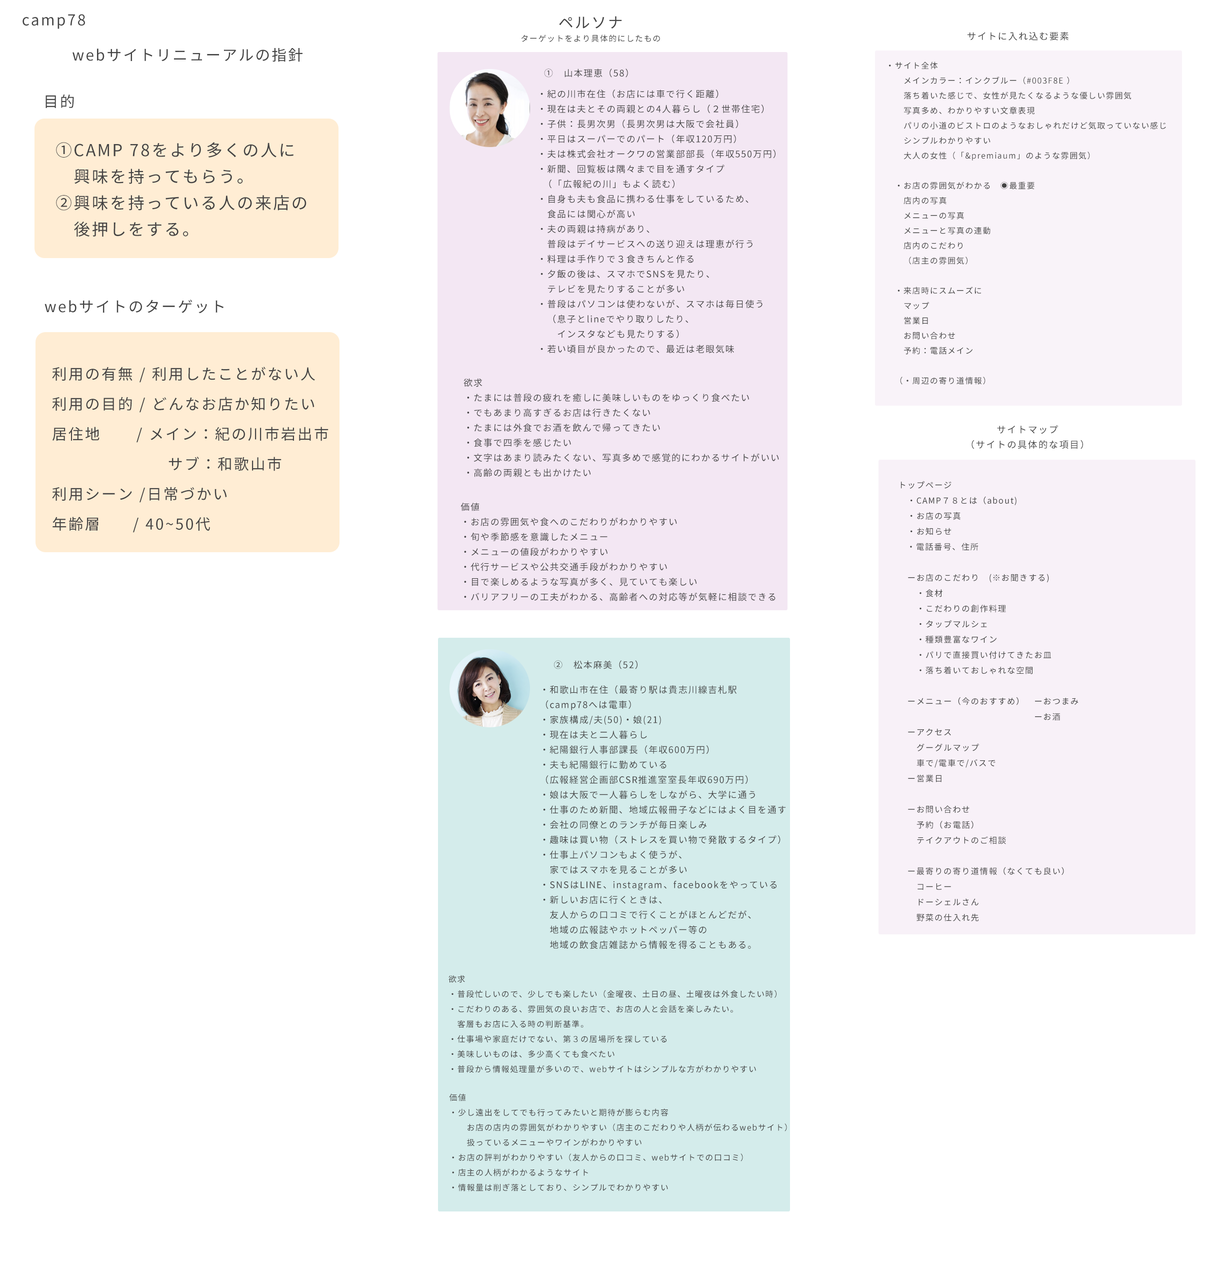
<style>
.page{position:relative;width:1225px;height:1284px;background:#ffffff}
.page>*{position:absolute;margin:0}
.t1{font:15px "NotoSansCJKjp-Regular";letter-spacing:0.1em;color:#444444}
.t2{font:8px "NotoSansCJKjp-Regular";letter-spacing:0.1em;color:#444444}
.t3{font:9.4px "NotoSansCJKjp-Regular";letter-spacing:0.1em;color:#444444}
.t4{font:8px/15px "NotoSansCJKjp-Regular";letter-spacing:0.1em;color:#444444}
.t5{font:9px "NotoSansCJKjp-Regular";letter-spacing:0.1em;color:#444444}
.t6{font:9px/15px "NotoSansCJKjp-Regular";letter-spacing:0.1em;color:#444444}
.t7{font:16.5px/26.4px "NotoSansCJKjp-Regular";letter-spacing:0.1em;color:#444444}
.t8{font:15px/30px "NotoSansCJKjp-Regular";letter-spacing:0.1em;color:#444444}
.t9{font:9.4px/15px "NotoSansCJKjp-Regular";letter-spacing:0.1em;color:#444444}
.t10{font:8.2px/15.4px "NotoSansCJKjp-Regular";letter-spacing:0.1em;color:#444444}
</style>
<div class="page">
<p class="t1" style="left:22px;top:14px;width:63px;height:15px">camp78</p>
<p class="t1" style="left:559px;top:16px;width:63px;height:12px">ペルソナ</p>
<p class="t2" style="left:521px;top:34px;width:139px;height:8px">ターゲットをより具体的にしたもの</p>
<p class="t3" style="left:968px;top:32px;width:100px;height:8px">サイトに入れ込む要素</p>
<p class="t1" style="left:72px;top:48px;width:230px;height:14px">webサイトリニューアルの指針</p>
<p class="t4" style="left:889px;top:62px;width:277px;height:322px">・サイト全体<br>　　メインカラー：インクブルー（#003F8E ）<br>　　落ち着いた感じで、女性が見たくなるような優しい雰囲気<br>　　写真多め、わかりやすい文章表現<br>　　パリの小道のビストロのようなおしゃれだけど気取っていない感じ<br>　　シンプルわかりやすい<br>　　大人の女性（「&amp;premiaum」のような雰囲気）<br><br>　・お店の雰囲気がわかる　◉最重要<br>　　店内の写真<br>　　メニューの写真<br>　　メニューと写真の連動<br>　　店内のこだわり<br>　　（店主の雰囲気）<br>　<br>　・来店時にスムーズに<br>　　マップ<br>　　営業日<br>　　お問い合わせ<br>　　予約：電話メイン<br>　<br>　（・周辺の寄り道情報）</p>
<p class="t5" style="left:544px;top:68px;width:84px;height:10px">①　山本理恵（58）</p>
<p class="t6" style="left:540px;top:90px;width:236px;height:264px">・紀の川市在住（お店には車で行く距離）<br>・現在は夫とその両親との4人暮らし（２世帯住宅）<br>・子供：長男次男（長男次男は大阪で会社員）<br>・平日はスーパーでのパート（年収120万円）<br>・夫は株式会社オークワの営業部部長（年収550万円）<br>・新聞、回覧板は隅々まで目を通すタイプ<br>  （「広報紀の川」もよく読む）<br>・自身も夫も食品に携わる仕事をしているため、<br>　食品には関心が高い<br>・夫の両親は持病があり、<br>　普段はデイサービスへの送り迎えは理恵が行う<br>・料理は手作りで３食きちんと作る<br>・夕飯の後は、スマホでSNSを見たり、<br>　テレビを見たりすることが多い<br>・普段はパソコンは使わないが、スマホは毎日使う<br>　（息子とlineでやり取りしたり、<br>　　インスタなども見たりする）<br>・若い頃目が良かったので、最近は老眼気味</p>
<p class="t1" style="left:46px;top:94px;width:28px;height:14px">目的</p>
<p class="t7" style="left:56px;top:142px;width:250px;height:94px">①CAMP 78をより多くの人に<br>　興味を持ってもらう。<br>②興味を持っている人の来店の<br>　後押しをする。</p>
<p class="t1" style="left:44px;top:300px;width:180px;height:14px">webサイトのターゲット</p>
<p class="t8" style="left:52px;top:366px;width:276px;height:166px">利用の有無 / 利用したことがない人<br>　利用の目的 / どんなお店か知りたい<br>　居住地       / メイン：紀の川市岩出市<br>　　　　　          サブ：和歌山市<br>　利用シーン /日常づかい<br>　年齢層　   / 40~50代</p>
<p class="t6" style="left:464px;top:378px;width:315px;height:99px">欲求<br>・たまには普段の疲れを癒しに美味しいものをゆっくり食べたい<br>・でもあまり高すぎるお店は行きたくない<br>・たまには外食でお酒を飲んで帰ってきたい<br>・食事で四季を感じたい<br>・文字はあまり読みたくない、写真多めで感覚的にわかるサイトがいい<br>・高齢の両親とも出かけたい</p>
<p class="t9" style="left:972px;top:425px;width:111px;height:24px;text-align:center">サイトマップ<br>（サイトの具体的な項目）</p>
<p class="t10" style="left:900px;top:481px;width:178px;height:440px">トップページ<br>　・CAMP７８とは（about)<br>　・お店の写真　<br>　・お知らせ<br>   ・電話番号、住所<br><br>　ーお店のこだわり　(※お聞きする)<br>　　・食材<br>　　・こだわりの創作料理<br>　　・タップマルシェ<br>　　・種類豊富なワイン<br>　　・パリで直接買い付けてきたお皿<br>　　・落ち着いておしゃれな空間<br><br>　ーメニュー（今のおすすめ）　ーおつまみ<br>　　　　　　　　　　　　　　　ーお酒<br>　ーアクセス<br>　　グーグルマップ<br>　　車で/電車で/バスで<br>　ー営業日<br>　　<br>　ーお問い合わせ<br>　　予約（お電話）<br>　　テイクアウトのご相談<br><br>　ー最寄りの寄り道情報（なくても良い）<br>　　コーヒー<br>　　ドーシェルさん<br>　　野菜の仕入れ先</p>
<p class="t6" style="left:460px;top:502px;width:316px;height:99px">価値<br>・お店の雰囲気や食へのこだわりがわかりやすい<br>・旬や季節感を意識したメニュー<br>・メニューの値段がわかりやすい<br>・代行サービスや公共交通手段がわかりやすい<br>・目で楽しめるような写真が多く、見ていても楽しい<br>・バリアフリーの工夫がわかる、高齢者への対応等が気軽に相談できる</p>
<p class="t5" style="left:554px;top:660px;width:84px;height:9px">②　松本麻美（52）</p>
<p class="t6" style="left:543px;top:685px;width:243px;height:263px">・和歌山市在住（最寄り駅は貴志川線吉札駅<br>（camp78へは電車）<br>・家族構成/夫(50)・娘(21)<br>・現在は夫と二人暮らし<br>・紀陽銀行人事部課長（年収600万円）<br>・夫も紀陽銀行に勤めている<br>（広報経営企画部CSR推進室室長年収690万円）<br>・娘は大阪で一人暮らしをしながら、大学に通う<br>・仕事のため新聞、地域広報冊子などにはよく目を通す<br>・会社の同僚とのランチが毎日楽しみ<br>・趣味は買い物（ストレスを買い物で発散するタイプ）<br>・仕事上パソコンもよく使うが、<br>　家ではスマホを見ることが多い<br>・SNSはLINE、instagram、facebookをやっている<br>・新しいお店に行くときは、<br>　友人からの口コミで行くことがほとんどだが、<br>　地域の広報誌やホットペッパー等の<br>　地域の飲食店雑誌から情報を得ることもある。</p>
<p class="t4" style="left:448px;top:974px;width:328px;height:98px">欲求<br>・普段忙しいので、少しでも楽したい（金曜夜、土日の昼、土曜夜は外食したい時）<br>・こだわりのある、雰囲気の良いお店で、お店の人と会話を楽しみたい。<br>　客層もお店に入る時の判断基準。<br>・仕事場や家庭だけでない、第３の居場所を探している<br>・美味しいものは、多少高くても食べたい<br>・普段から情報処理量が多いので、webサイトはシンプルな方がわかりやすい</p>
<p class="t4" style="left:449px;top:1093px;width:338px;height:98px">価値<br>・少し遠出をしてでも行ってみたいと期待が膨らむ内容<br>　　お店の店内の雰囲気がわかりやすい（店主のこだわりや人柄が伝わるwebサイト）<br>　　扱っているメニューやワインがわかりやすい　　<br>・お店の評判がわかりやすい（友人からの口コミ、webサイトでの口コミ）<br>・店主の人柄がわかるようなサイト<br>・情報量は削ぎ落としており、シンプルでわかりやすい</p>
</div>
